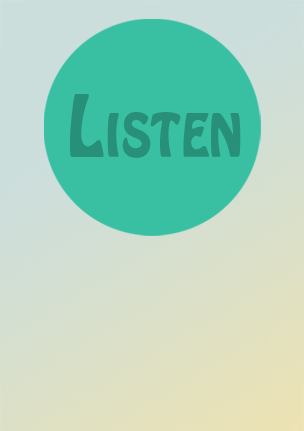
<style>
.page{position:relative;width:304px;height:431px;background:#39c0a2}
.page>*{position:absolute;margin:0}
.t1{font:74px "HoboStd";color:#288f78;font-variant:small-caps;font-weight:bold;scale:0.87 1}
</style>
<div class="page">
<p class="t1" style="left:70px;top:94px;width:171px;height:64px">Listen</p>
</div>
